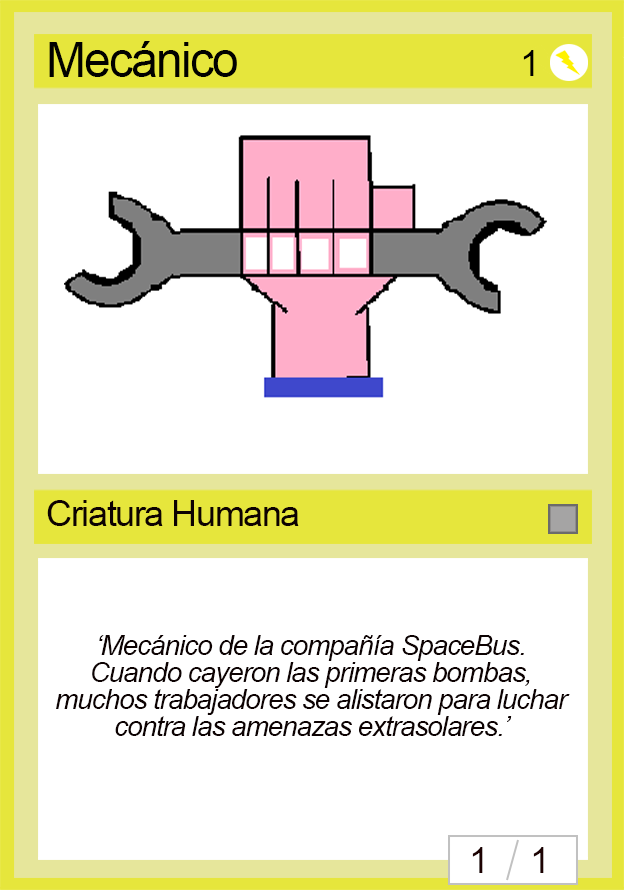
<style>
.page{position:relative;width:624px;height:890px;background:#ffffff}
.page>*{position:absolute;margin:0}
.t1{font:48px "ArialMT";letter-spacing:-0.04em;color:#010100}
.t2{font:36px "ArialMT";letter-spacing:-0.04em;color:#000000}
.t3{font:36px "ArialMT";letter-spacing:-0.04em;color:#0d0202}
.t4{font:28px/27px "Arial-ItalicMT";letter-spacing:-0.04em;color:#0d0202}
.t5{font:36px "ArialMT";letter-spacing:-0.04em;color:#1d0202}
</style>
<div class="page">
<p class="t1" style="left:49px;top:41px;width:188px;height:36px">Mecánico</p>
<p class="t2" style="left:523px;top:50px;width:11px;height:26px">1</p>
<p class="t3" style="left:47px;top:500px;width:252px;height:26px">Criatura Humana</p>
<p class="t4" style="left:56px;top:635px;width:514px;height:101px;text-align:center">‘Mecánico de la compañía SpaceBus. Cuando cayeron las primeras bombas, muchos trabajadores se alistaron para luchar contra las amenazas extrasolares.’</p>
<p class="t5" style="left:472px;top:847px;width:11px;height:26px">1</p>
<p class="t5" style="left:533px;top:847px;width:11px;height:26px">1</p>
</div>
